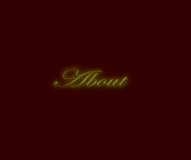
<style>
.page{position:relative;width:191px;height:160px;background:#330000}
.page>*{position:absolute;margin:0}
.t1{font:25.2px "EdwardianScriptITC";letter-spacing:0.025em;color:#82822e;scale:1.43 1}
</style>
<div class="page">
<p class="t1" style="left:54px;top:68px;width:74px;height:19px">About</p>
</div>
